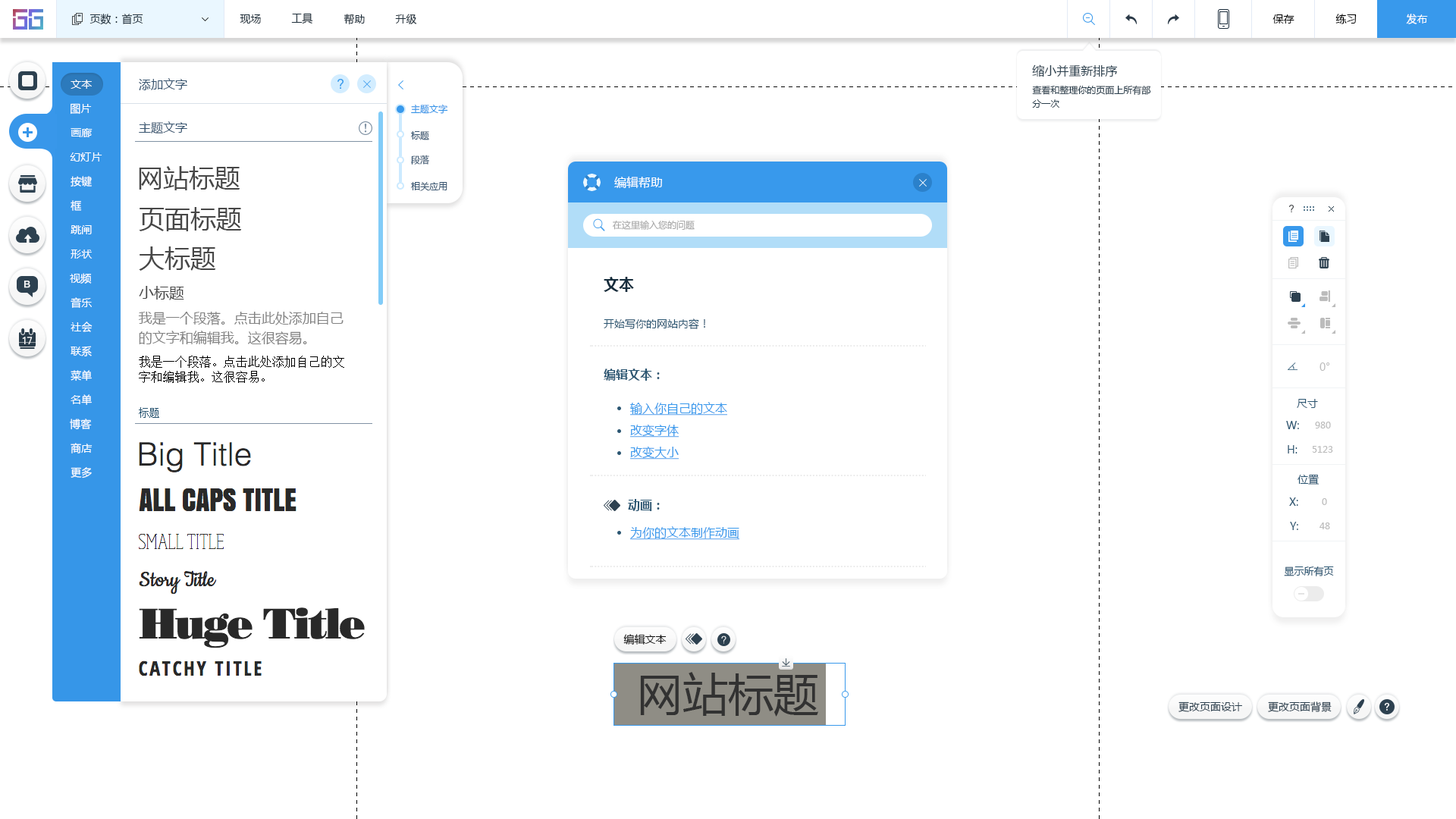
<style>
.page{position:relative;width:1456px;height:819px;background:#ffffff}
.page>*{position:absolute;margin:0}
.t1{font:10.6px "MicrosoftYaHei";color:#20303c}
.t2{font:10.6px "MicrosoftYaHei";color:#000000}
.t3{font:10.6px "MicrosoftYaHei";color:#ffffff}
.t4{font:12.1px "MicrosoftYaHei";color:#2a3f4d}
.t5{font:12.1px "MicrosoftYaHei";color:#395671}
.t6{font:9.1px/13.6px "MicrosoftYaHei";color:#2a3f4d}
.t7{font:9.1px "MicrosoftYaHei";color:#3696e8}
.t8{font:9.1px "MicrosoftYaHei";color:#395671}
.t9{font:25.8px "MicrosoftYaHei";color:#474747}
.t10{font:12.1px "MicrosoftYaHei";color:#ffffff}
.t11{font:9.1px "MicrosoftYaHei";color:#a9a9a9}
.t12{font:15.2px "MicrosoftYaHei-Bold";color:#162d3d}
.t13{font:15.2px "MicrosoftYaHei";color:#474747}
.t14{font:13.6px/19.7px "MicrosoftYaHei";color:#828282}
.t15{font:10.6px "MicrosoftYaHei";color:#2b5672}
.t16{font:12.1px/15.2px "SimSun";color:#000000}
.t17{font:10.6px "MicrosoftYaHei";color:#bcbcbc}
.t18{font:12.1px "MicrosoftYaHei-Bold";color:#2b5672}
.t19{font:12.1px "MicrosoftYaHei";color:#3899ec;text-decoration:underline}
.t20{font:10.6px "SimSun";color:#2b5672}
.t21{font:9.1px "MicrosoftYaHei";color:#bcbcbc}
.t22{font:9.9px "MicrosoftYaHei";color:#2b5672}
.t23{font:10.6px "MicrosoftYaHei";color:#111111}
.t24{font:45.5px "MicrosoftYaHei";color:#323232}
.t25{font:10.6px "MicrosoftYaHei";color:#2d4150}
</style>
<div class="page">
<p class="t1" style="left:89px;top:14px;width:54px;height:11px">页数：首页</p>
<p class="t1" style="left:240px;top:14px;width:21px;height:10px">现场</p>
<p class="t1" style="left:291px;top:13px;width:22px;height:11px">工具</p>
<p class="t1" style="left:344px;top:14px;width:21px;height:11px">帮助</p>
<p class="t1" style="left:395px;top:14px;width:22px;height:10px">升级</p>
<p class="t2" style="left:1272px;top:14px;width:22px;height:10px">保存</p>
<p class="t2" style="left:1335px;top:14px;width:22px;height:10px">练习</p>
<p class="t3" style="left:1406px;top:14px;width:22px;height:10px">发布</p>
<p class="t4" style="left:1032px;top:64px;width:86px;height:13px">缩小并重新排序</p>
<p class="t3" style="left:71px;top:80px;width:21px;height:9px">文本</p>
<p class="t5" style="left:139px;top:78px;width:48px;height:12px">添加文字</p>
<p class="t6" style="left:1032px;top:85px;width:119px;height:23px">查看和整理你的页面上所有部<br>分一次</p>
<p class="t3" style="left:71px;top:103px;width:21px;height:12px">图片</p>
<p class="t7" style="left:411px;top:104px;width:37px;height:10px">主题文字</p>
<p class="t5" style="left:139px;top:121px;width:48px;height:12px">主题文字</p>
<p class="t3" style="left:71px;top:128px;width:22px;height:9px">画廊</p>
<p class="t8" style="left:411px;top:131px;width:18px;height:9px">标题</p>
<p class="t3" style="left:70px;top:152px;width:32px;height:10px">幻灯片</p>
<p class="t8" style="left:411px;top:155px;width:18px;height:10px">段落</p>
<p class="t9" style="left:139px;top:166px;width:101px;height:24px">网站标题</p>
<p class="t3" style="left:71px;top:176px;width:21px;height:11px">按键</p>
<p class="t8" style="left:411px;top:182px;width:36px;height:9px">相关应用</p>
<p class="t10" style="left:614px;top:176px;width:48px;height:12px">编辑帮助</p>
<p class="t3" style="left:71px;top:200px;width:11px;height:11px">框</p>
<p class="t9" style="left:139px;top:207px;width:103px;height:24px">页面标题</p>
<p class="t11" style="left:613px;top:220px;width:82px;height:10px">在这里输入您的问题</p>
<p class="t3" style="left:71px;top:225px;width:21px;height:9px">跳闸</p>
<p class="t3" style="left:71px;top:249px;width:22px;height:10px">形状</p>
<p class="t9" style="left:139px;top:246px;width:77px;height:25px">大标题</p>
<p class="t3" style="left:70px;top:273px;width:22px;height:11px">视频</p>
<p class="t12" style="left:604px;top:277px;width:30px;height:15px">文本</p>
<p class="t13" style="left:139px;top:286px;width:45px;height:14px">小标题</p>
<p class="t3" style="left:71px;top:297px;width:21px;height:11px">音乐</p>
<p class="t14" style="left:138px;top:311px;width:206px;height:34px">我是一个段落。点击此处添加自己<br>的文字和编辑我。这很容易。</p>
<p class="t3" style="left:71px;top:322px;width:22px;height:10px">社会</p>
<p class="t15" style="left:604px;top:318px;width:101px;height:11px">开始写你的网站内容！</p>
<p class="t3" style="left:71px;top:346px;width:21px;height:10px">联系</p>
<p class="t16" style="left:139px;top:356px;width:205px;height:27px">我是一个段落。点击此处添加自己的文<br>字和编辑我。这很容易。</p>
<p class="t17" style="left:1319px;top:362px;width:11px;height:9px">0°</p>
<p class="t3" style="left:71px;top:370px;width:21px;height:11px">菜单</p>
<p class="t18" style="left:604px;top:369px;width:56px;height:12px">编辑文本：</p>
<p class="t3" style="left:71px;top:394px;width:21px;height:11px">名单</p>
<p class="t19" style="left:630px;top:402px;width:97px;height:14px">输入你自己的文本</p>
<p class="t15" style="left:1297px;top:399px;width:21px;height:9px">尺寸</p>
<p class="t20" style="left:139px;top:407px;width:20px;height:11px">标题</p>
<p class="t3" style="left:70px;top:419px;width:22px;height:11px">博客</p>
<p class="t19" style="left:630px;top:424px;width:49px;height:14px">改变字体</p>
<p class="t15" style="left:1286px;top:421px;width:13px;height:8px">W:</p>
<p class="t21" style="left:1315px;top:422px;width:16px;height:6px">980</p>
<p class="t3" style="left:71px;top:443px;width:22px;height:10px">商店</p>
<p class="t19" style="left:630px;top:446px;width:49px;height:14px">改变大小</p>
<p class="t15" style="left:1288px;top:445px;width:9px;height:8px">H:</p>
<p class="t21" style="left:1312px;top:446px;width:21px;height:7px">5123</p>
<p class="t3" style="left:71px;top:467px;width:21px;height:12px">更多</p>
<p class="t15" style="left:1297px;top:474px;width:22px;height:11px">位置</p>
<p class="t15" style="left:1289px;top:497px;width:9px;height:9px">X:</p>
<p class="t18" style="left:628px;top:499px;width:32px;height:12px">动画：</p>
<p class="t21" style="left:1322px;top:498px;width:5px;height:7px">0</p>
<p class="t15" style="left:1290px;top:522px;width:8px;height:8px">Y:</p>
<p class="t19" style="left:630px;top:526px;width:109px;height:14px">为你的文本制作动画</p>
<p class="t21" style="left:1319px;top:522px;width:11px;height:7px">48</p>
<p class="t22" style="left:1284px;top:566px;width:50px;height:10px">显示所有页</p>
<p class="t23" style="left:623px;top:634px;width:44px;height:11px">编辑文本</p>
<p class="t24" style="left:640px;top:672px;width:178px;height:45px">网站标题</p>
<p class="t25" style="left:1178px;top:701px;width:64px;height:11px">更改页面设计</p>
<p class="t25" style="left:1268px;top:701px;width:64px;height:11px">更改页面背景</p>
</div>
